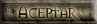
<style>
.page{position:relative;width:97px;height:24px}
.page>*{position:absolute;margin:0}
.t1{font:17.1px "Morpheus";color:#2d1a02}
</style>
<div class="page">
<p class="t1" style="left:17px;top:5px;width:63px;height:15px">Aceptar</p>
</div>
